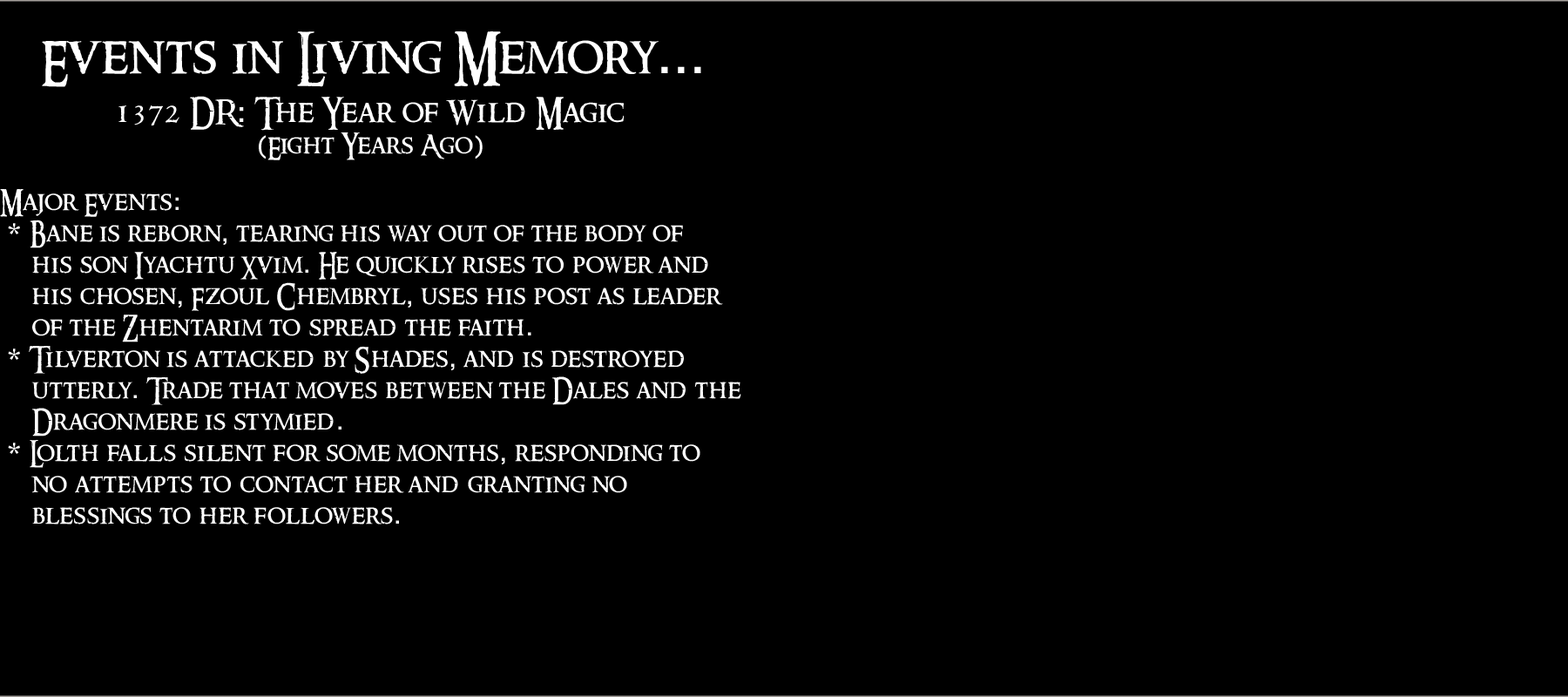
<style>
.page{position:relative;width:1568px;height:697px;background:#000000}
.page>*{position:absolute;margin:0}
.t1{font:26.1px "RingbearerMedium";letter-spacing:0.025em;color:#ffffff}
.t2{font:15.7px "RingbearerMedium";letter-spacing:0.025em;color:#ffffff}
.t3{font:52.3px "RingbearerMedium";letter-spacing:0.025em;color:#ffffff}
.t4{font:52.3px "Rockwell";letter-spacing:0.025em;color:#ffffff}
.t5{font:31.4px "RingbearerMedium";letter-spacing:0.025em;color:#ffffff}
.t6{font:31.4px "Rockwell";letter-spacing:0.025em;color:#ffffff}
.t7{font:26.1px "Rockwell";letter-spacing:0.025em;color:#ffffff}
</style>
<div class="page">
<p class="t1" style="left:0px;top:31px;width:741px;height:493px;text-align:center"><span class="t2"><br></span><span class="t3">Events in Living Memory</span><span class="t4">...<br><br></span><span class="t5">1372 DR</span><span class="t6">:</span><span class="t5"> The Year of Wild Magic<br></span><span class="t7">(</span>Eight Years Ago<span class="t7">)<br><br></span>Major Events<span class="t7">:<br> * </span>Bane is reborn<span class="t7">,</span> tearing his way out of the body of <br> his son Iyachtu Xvim<span class="t7">.</span> He quickly rises to power and <br> his chosen<span class="t7">,</span> Fzoul Chembryl<span class="t7">,</span> uses his post as leader <br> of the Zhentarim to spread the faith<span class="t7">.<br> * </span>Tilverton is attacked by Shades<span class="t7">,</span> and is destroyed <br> utterly<span class="t7">.</span> Trade that moves between the Dales and the <br> Dragonmere is stymied<span class="t7">.<br> * </span>Lolth falls silent for some months<span class="t7">,</span> responding to <br> no attempts to contact her and granting no <br> blessings to her followers<span class="t7">.</span></p>
</div>
